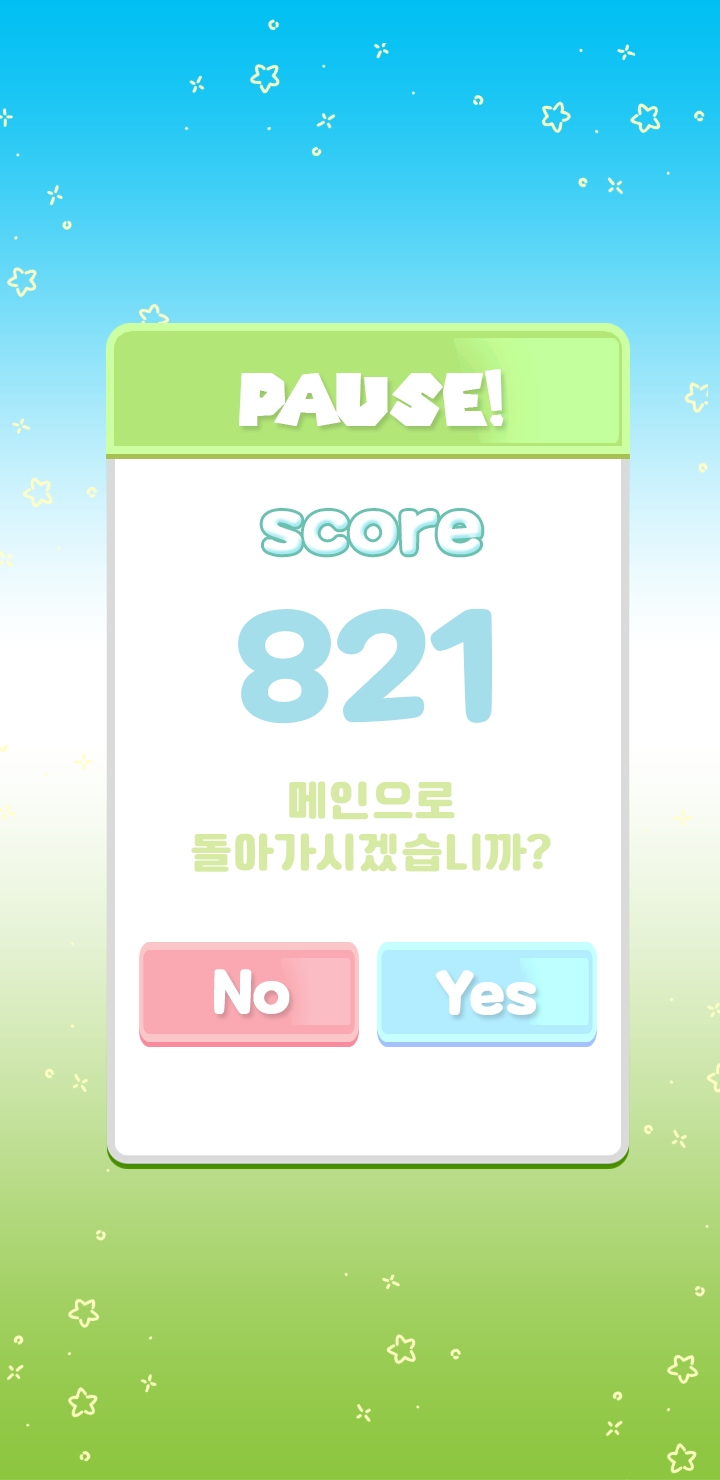
<style>
.page{position:relative;width:720px;height:1480px;background:#ffffff}
.page>*{position:absolute;margin:0}
.t1{font:70px "SuperMarioGalaxy";color:#ffffff;font-weight:bold}
.t2{font:76.4px "MaplestoryBold";color:#ffffff;font-weight:bold}
.t3{font:149.3px "MaplestoryBold";color:#a4deea;font-weight:bold}
.t4{font:43px "Cafe24Ssurround";color:#d7eaa4;font-weight:bold}
.t5{font:58.5px "MaplestoryBold";color:#ffffff;font-weight:bold}
</style>
<div class="page">
<p class="t1" style="left:239px;top:369px;width:265px;height:57px">pause!</p>
<p class="t2" style="left:262px;top:511px;width:220px;height:44px">score</p>
<p class="t3" style="left:238px;top:608px;width:255px;height:116px">821</p>
<p class="t4" style="left:191px;top:781px;width:360px;height:91px;text-align:center">메인으로<br>돌아가시겠습니까?</p>
<p class="t5" style="left:214px;top:969px;width:76px;height:45px">No</p>
<p class="t5" style="left:435px;top:970px;width:101px;height:45px">Yes</p>
</div>
